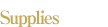
<style>
.page{position:relative;width:108px;height:27px;background:#ffffff}
.page>*{position:absolute;margin:0}
.t1{font:18px "RyuminPro-ExBold";letter-spacing:-0.08em;color:#c4a956}
</style>
<div class="page">
<p class="t1" style="left:0px;top:10px;width:59px;height:17px">Supplies</p>
</div>
